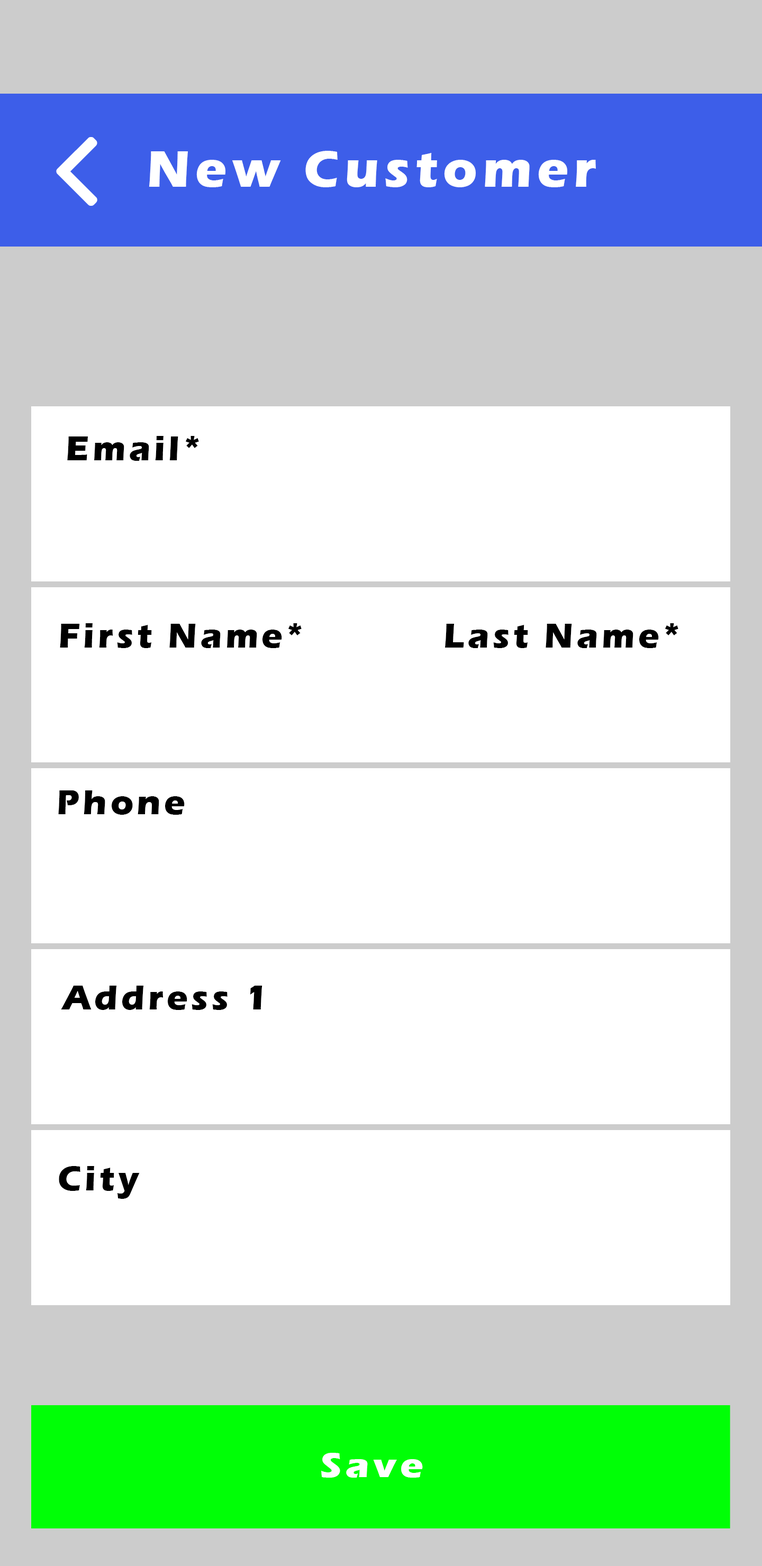
<style>
.page{position:relative;width:762px;height:1566px;background:#ffffff}
.page>*{position:absolute;margin:0}
.t1{font:52.9px "ErasITC-Bold";letter-spacing:0.1em;color:#ffffff}
.t2{font:35.3px "ErasITC-Bold";letter-spacing:0.1em;color:#000000}
.t3{font:35.3px "ErasITC-Bold";letter-spacing:0.1em;color:#ffffff;scale:1.11 1}
</style>
<div class="page">
<p class="t1" style="left:149px;top:151px;width:447px;height:36px">New Customer</p>
<p class="t2" style="left:67px;top:436px;width:132px;height:25px">Email*</p>
<p class="t2" style="left:60px;top:623px;width:241px;height:25px">First Name*</p>
<p class="t2" style="left:445px;top:623px;width:233px;height:25px">Last Name*</p>
<p class="t2" style="left:58px;top:790px;width:127px;height:25px">Phone</p>
<p class="t2" style="left:61px;top:985px;width:201px;height:25px">Address 1</p>
<p class="t2" style="left:59px;top:1166px;width:81px;height:33px">City</p>
<p class="t3" style="left:321px;top:1452px;width:102px;height:25px">Save</p>
</div>
